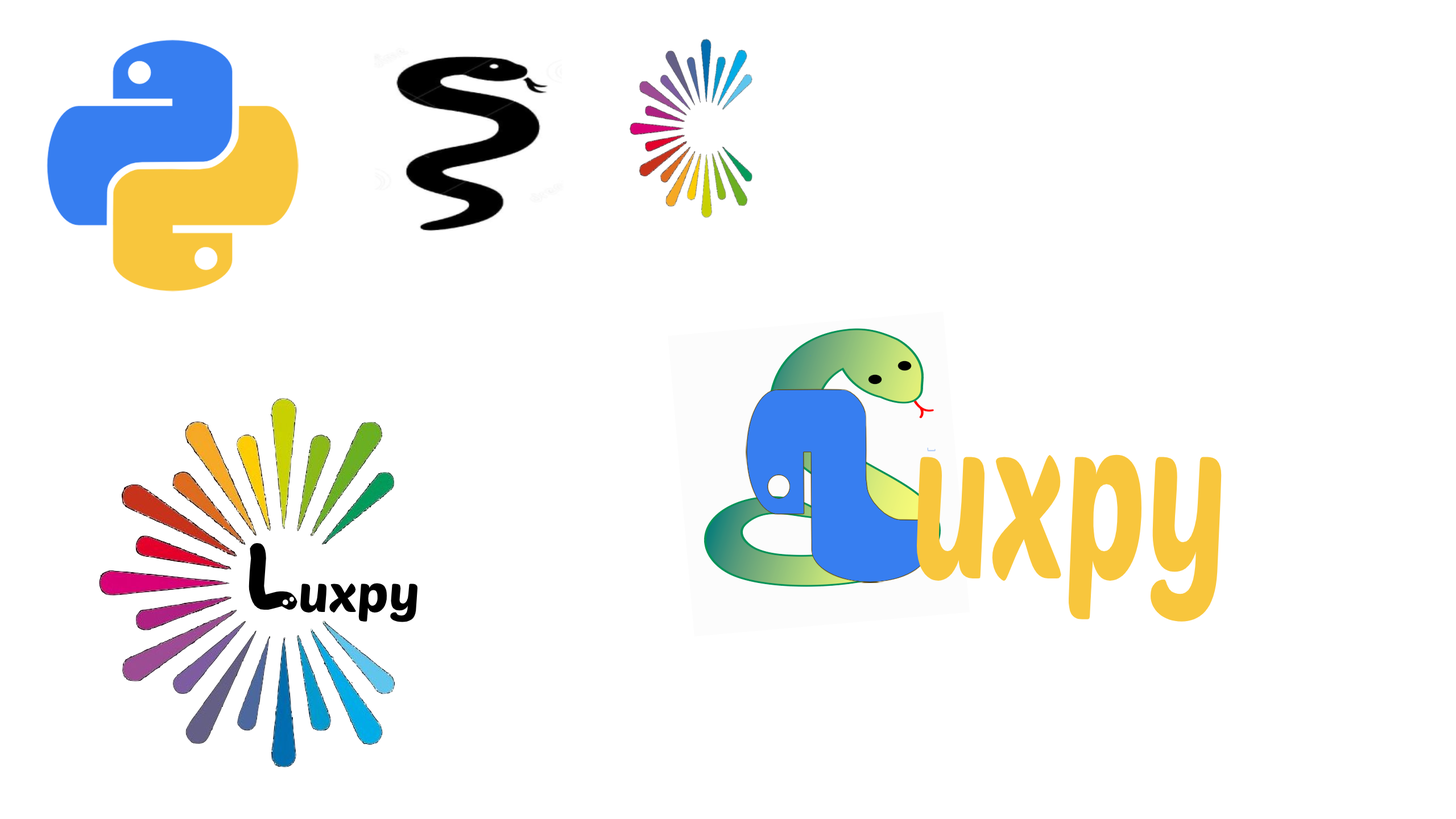
<style>
.page{position:relative;width:1456px;height:819px;background:#ffffff}
.page>*{position:absolute;margin:0}
.t1{font:220.7px "PoetsenOne-Regular";color:#f8c63d;scale:0.6 1}
.t2{font:51.2px "PoetsenOne-Regular";color:#000000}
.t3{font:85.3px "SnakeChan";color:#000000}
</style>
<div class="page">
<p class="t1" style="left:916px;top:454px;width:306px;height:168px">uxpy</p>
<p class="t2" style="left:249px;top:543px;width:168px;height:79px"><span class="t3">L</span>uxpy</p>
</div>
